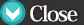
<style>
.page{position:relative;width:84px;height:25px;background:#333333}
.page>*{position:absolute;margin:0}
.t1{font:22px "HeiseiMinStd-W7";letter-spacing:-0.04em;color:#ffffff}
</style>
<div class="page">
<p class="t1" style="left:30px;top:5px;width:48px;height:17px">Close</p>
</div>
